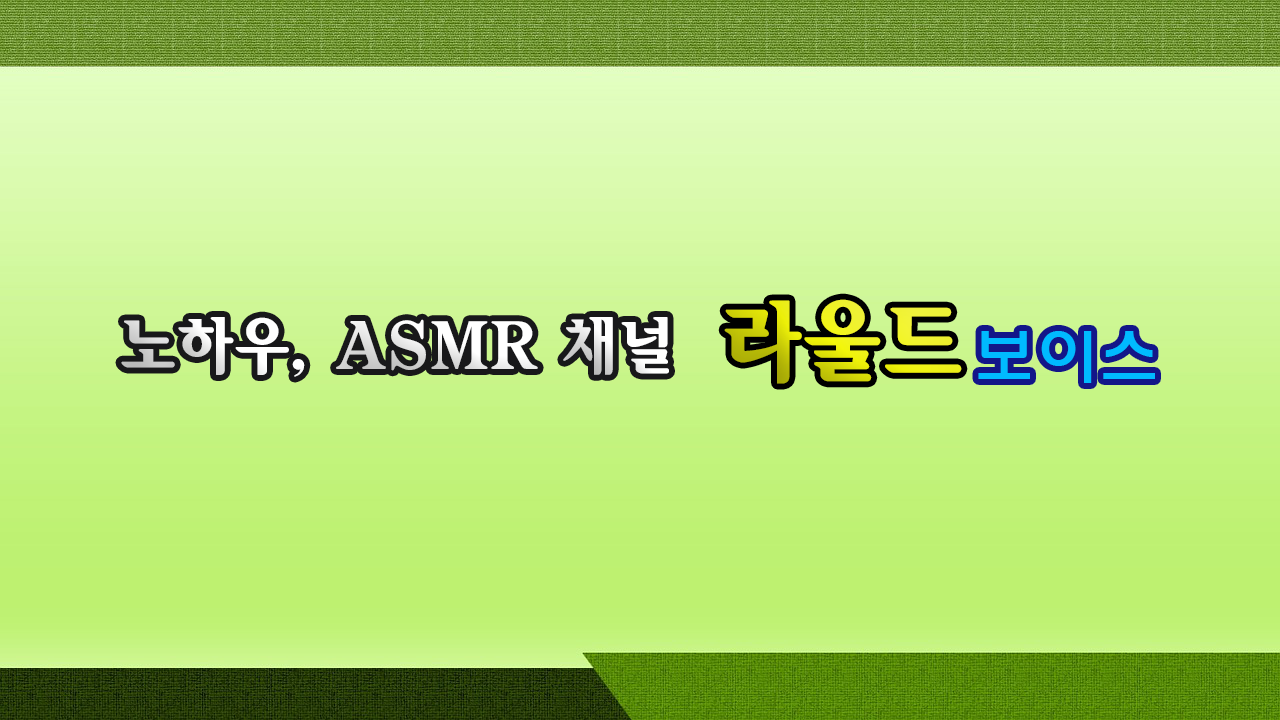
<style>
.page{position:relative;width:1280px;height:720px}
.page>*{position:absolute;margin:0}
.t1{font:90.2px "HaanSollipB"}
.t2{font:62.9px "HaanSollipB";color:#ffffff}
.t3{font:62.4px "HYwulM";color:#00baff}
</style>
<div class="page">
<p class="t1" style="left:724px;top:299px;width:238px;height:85px">라울드</p>
<p class="t2" style="left:121px;top:317px;width:548px;height:60px">노하우, ASMR 채널</p>
<p class="t3" style="left:978px;top:331px;width:177px;height:52px">보이스</p>
</div>
